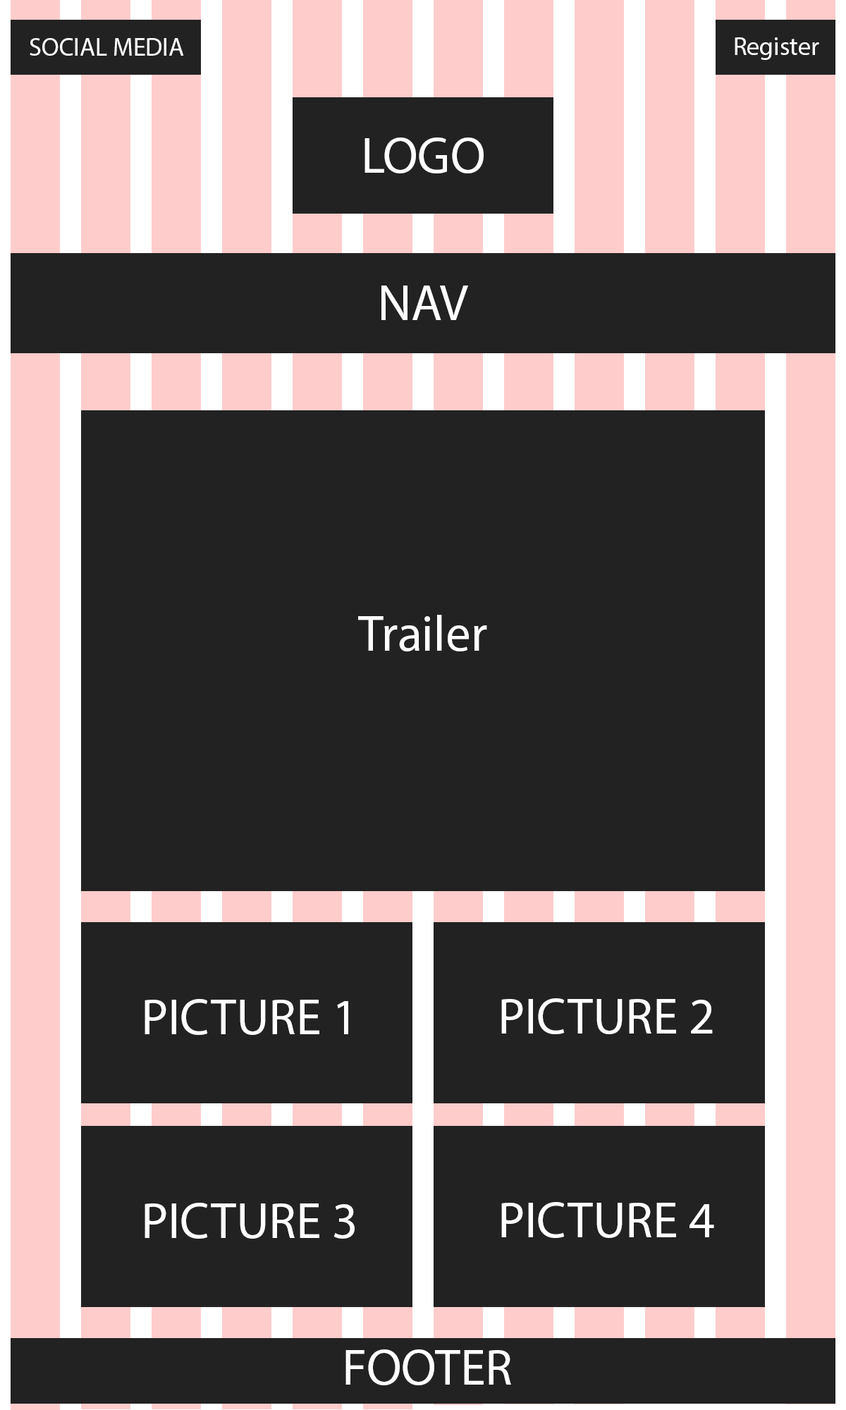
<style>
.page{position:relative;width:846px;height:1410px;background:#222222}
.page>*{position:absolute;margin:0}
.t1{font:25.4px "MyriadPro-Regular";color:#ffffff}
.t2{font:50.8px "MyriadPro-Regular";color:#ffffff}
</style>
<div class="page">
<p class="t1" style="left:30px;top:38px;width:154px;height:18px">SOCIAL MEDIA</p>
<p class="t1" style="left:734px;top:37px;width:85px;height:23px">Register</p>
<p class="t2" style="left:364px;top:137px;width:120px;height:36px">LOGO</p>
<p class="t2" style="left:381px;top:285px;width:87px;height:35px">NAV</p>
<p class="t2" style="left:358px;top:615px;width:129px;height:36px">Trailer</p>
<p class="t2" style="left:144px;top:999px;width:204px;height:36px">PICTURE 1</p>
<p class="t2" style="left:501px;top:998px;width:212px;height:36px">PICTURE 2</p>
<p class="t2" style="left:144px;top:1203px;width:211px;height:35px">PICTURE 3</p>
<p class="t2" style="left:501px;top:1202px;width:213px;height:36px">PICTURE 4</p>
<p class="t2" style="left:345px;top:1349px;width:166px;height:36px">FOOTER</p>
</div>
